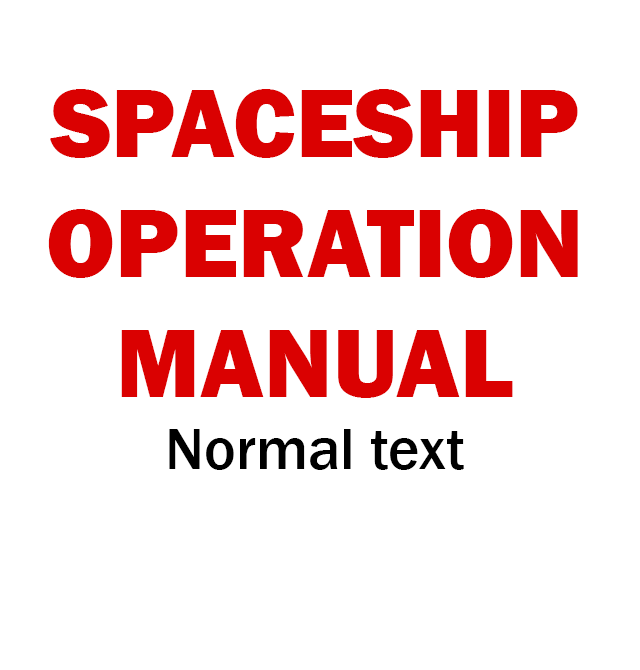
<style>
.page{position:relative;width:640px;height:670px;background:#ffffff}
.page>*{position:absolute;margin:0}
.t1{font:100px "FranklinGothic-Heavy";color:#da0101}
.t2{font:60px "FranklinGothic-Medium";color:#000000}
</style>
<div class="page">
<p class="t1" style="left:48px;top:89px;width:530px;height:381px;text-align:center">SPACESHIP<br>OPERATION<br>MANUAL<br><span class="t2">Normal text</span></p>
</div>
